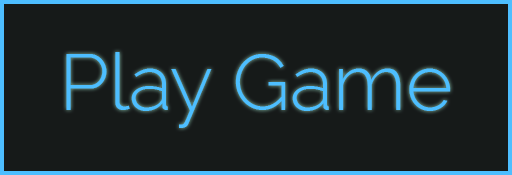
<style>
.page{position:relative;width:512px;height:175px;background:#161a19}
.page>*{position:absolute;margin:0}
.t1{font:80px "Raleway-Light";color:#4dbeff}
</style>
<div class="page">
<p class="t1" style="left:66px;top:52px;width:385px;height:76px">Play Game</p>
</div>
